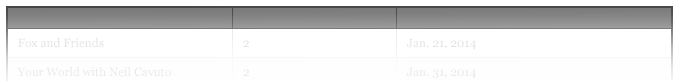
<style>
.page{position:relative;width:679px;height:81px;background:#ffffff}
.page>*{position:absolute;margin:0}
.t1{font:12px "Georgia";color:#e4e4e4}
.t2{font:12px "Georgia";color:#eaeaea}
</style>
<div class="page">
<p class="t1" style="left:18px;top:38px;width:86px;height:10px">Fox and Friends</p>
<p class="t1" style="left:243px;top:40px;width:6px;height:7px">2</p>
<p class="t1" style="left:406px;top:38px;width:70px;height:12px">Jan. 21, 2014</p>
<p class="t2" style="left:17px;top:67px;width:154px;height:10px">Your World with Neil Cavuto</p>
<p class="t2" style="left:243px;top:69px;width:6px;height:7px">2</p>
<p class="t2" style="left:406px;top:67px;width:70px;height:12px">Jan. 31, 2014</p>
</div>
